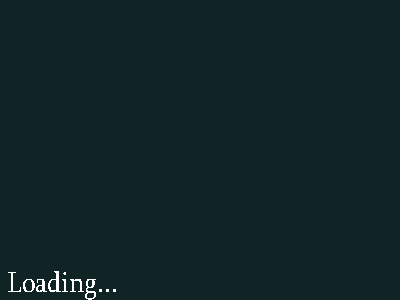
<style>
.page{position:relative;width:400px;height:300px;background:#102325}
.page>*{position:absolute;margin:0}
.t1{font:30px "Sylfaen";color:#ffffff;scale:0.9 1}
</style>
<div class="page">
<p class="t1" style="left:8px;top:271px;width:108px;height:29px">Loading...</p>
</div>
